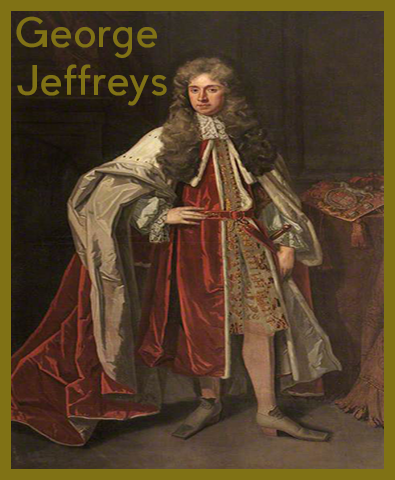
<style>
.page{position:relative;width:395px;height:480px}
.page>*{position:absolute;margin:0}
.t1{font:40px "PierSans";color:#807215}
</style>
<div class="page">
<p class="t1" style="left:16px;top:16px;width:151px;height:90px">George<br>Jeffreys</p>
</div>
